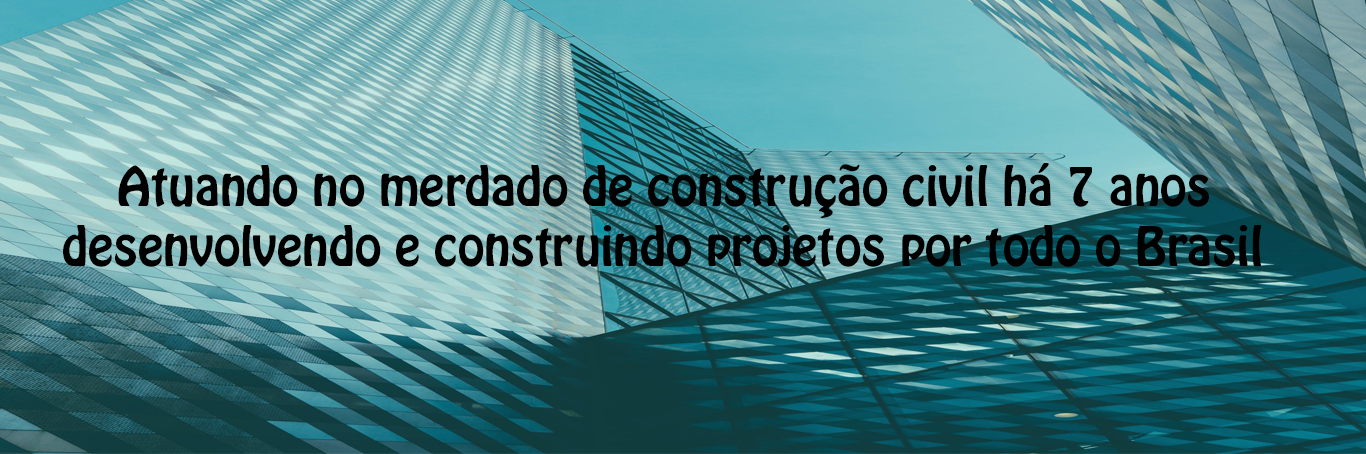
<style>
.page{position:relative;width:1366px;height:454px}
.page>*{position:absolute;margin:0}
.t1{font:48px/20px "HoboStd";color:#000000}
</style>
<div class="page">
<p class="t1" style="left:63px;top:163px;width:1199px;height:104px">Atuando no merdado de construção civil há 7 anos <br><br><br>desenvolvendo e construindo projetos por todo o Brasil</p>
</div>
